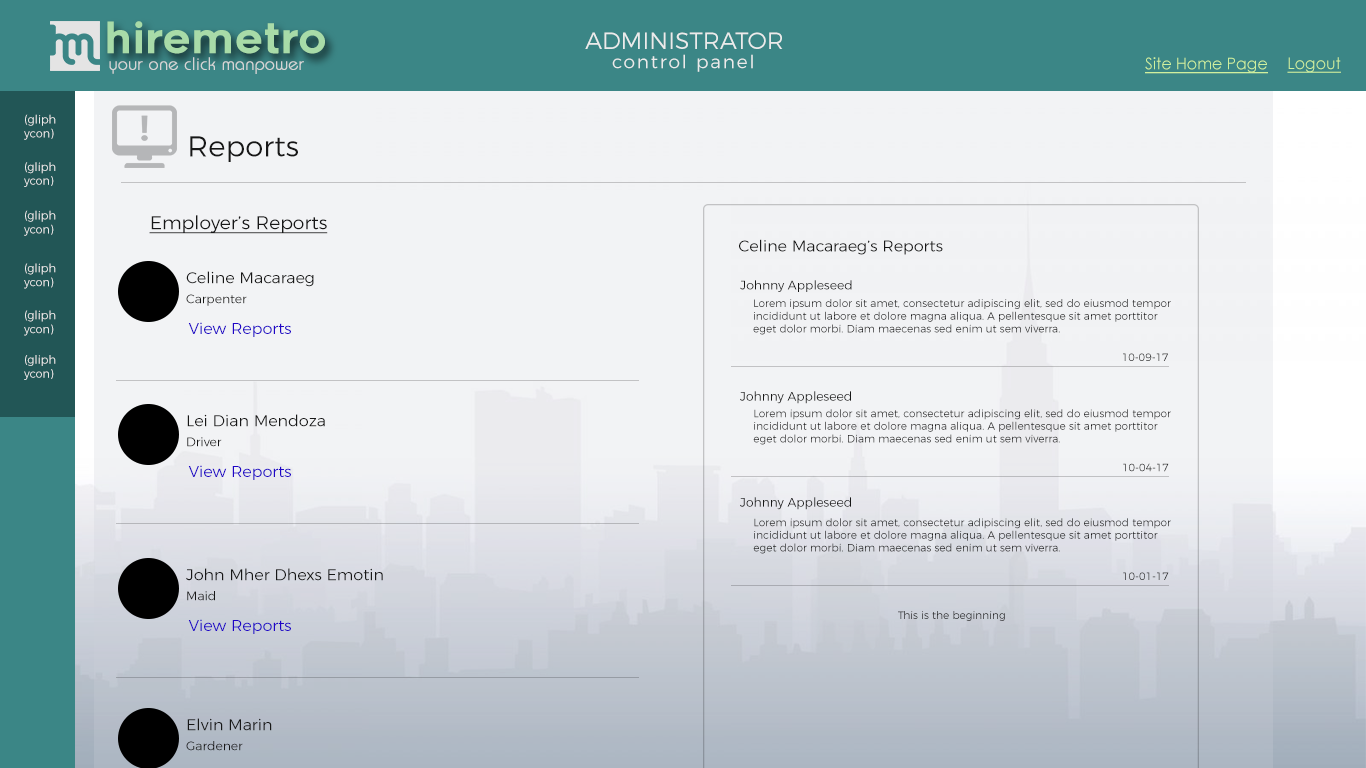
<style>
.page{position:relative;width:1366px;height:768px;background:#f2f3f5}
.page>*{position:absolute;margin:0}
.t1{font:42.1px "Renogare-Regular";color:#a8dba8}
.t2{font:23.6px "Montserrat-Light";color:#ebebeb}
.t3{font:18.4px "Montserrat-Light";letter-spacing:0.1em;color:#ebebeb}
.t4{font:17.5px "Brie-Light";color:#d5d5d5;font-weight:bold}
.t5{font:16.1px "CenturyGothic";color:#cff09e;text-decoration:underline}
.t6{font:11.5px "Montserrat-Light";color:#ebebeb}
.t7{font:28.9px "Montserrat-Light";color:#171717}
.t8{font:18.8px "Montserrat-Light";color:#171717;text-decoration:underline}
.t9{font:15.9px "Montserrat-Light";color:#171717}
.t10{font:12.3px "Montserrat-Light";color:#171717}
.t11{font:10.6px "Montserrat-Light";color:#171717}
.t12{font:15.9px "Montserrat-Light";color:#1f04c6}
.t13{font:10.6px "Montserrat-Light"}
.t14{font:12.6px "Montserrat-Light";color:#171717}
.t15{font:10.5px "Montserrat-Light";color:#171717}
.t16{font:10.5px "Montserrat-Light"}
</style>
<div class="page">
<p class="t1" style="left:107px;top:21px;width:218px;height:33px">hiremetro</p>
<p class="t2" style="left:585px;top:32px;width:198px;height:17px">ADMINISTRATOR</p>
<p class="t3" style="left:612px;top:54px;width:141px;height:18px">control panel</p>
<p class="t4" style="left:109px;top:57px;width:195px;height:17px">your one click manpower</p>
<p class="t5" style="left:1145px;top:57px;width:123px;height:17px">Site Home Page</p>
<p class="t5" style="left:1287px;top:57px;width:54px;height:16px">Logout</p>
<p class="t6" style="left:24px;top:114px;width:32px;height:26px">(gliph<br>ycon)</p>
<p class="t7" style="left:190px;top:136px;width:108px;height:26px">Reports</p>
<p class="t6" style="left:24px;top:162px;width:32px;height:25px">(gliph<br>ycon)</p>
<p class="t6" style="left:24px;top:210px;width:32px;height:26px">(gliph<br>ycon)</p>
<p class="t8" style="left:149px;top:215px;width:179px;height:19px">Employer’s Reports</p>
<p class="t9" style="left:739px;top:239px;width:204px;height:16px">Celine Macaraeg’s Reports</p>
<p class="t6" style="left:24px;top:263px;width:32px;height:26px">(gliph<br>ycon)</p>
<p class="t9" style="left:186px;top:271px;width:128px;height:16px">Celine Macaraeg</p>
<p class="t10" style="left:740px;top:280px;width:112px;height:12px">Johnny Appleseed</p>
<p class="t10" style="left:186px;top:294px;width:61px;height:12px">Carpenter</p>
<p class="t11" style="left:753px;top:299px;width:418px;height:36px">Lorem ipsum dolor sit amet, consectetur adipiscing elit, sed do eiusmod tempor incididunt ut labore et dolore magna aliqua. A pellentesque sit amet porttitor eget dolor morbi. Diam maecenas sed enim ut sem viverra.</p>
<p class="t6" style="left:24px;top:310px;width:32px;height:26px">(gliph<br>ycon)</p>
<p class="t12" style="left:188px;top:322px;width:103px;height:15px">View Reports</p>
<p class="t13" style="left:1123px;top:353px;width:45px;height:8px">10-09-17</p>
<p class="t6" style="left:24px;top:355px;width:32px;height:25px">(gliph<br>ycon)</p>
<p class="t14" style="left:740px;top:391px;width:111px;height:13px">Johnny Appleseed</p>
<p class="t9" style="left:187px;top:414px;width:138px;height:13px">Lei Dian Mendoza</p>
<p class="t15" style="left:753px;top:409px;width:418px;height:36px">Lorem ipsum dolor sit amet, consectetur adipiscing elit, sed do eiusmod tempor incididunt ut labore et dolore magna aliqua. A pellentesque sit amet porttitor eget dolor morbi. Diam maecenas sed enim ut sem viverra.</p>
<p class="t10" style="left:187px;top:437px;width:35px;height:10px">Driver</p>
<p class="t12" style="left:188px;top:465px;width:103px;height:15px">View Reports</p>
<p class="t16" style="left:1123px;top:463px;width:46px;height:9px">10-04-17</p>
<p class="t14" style="left:740px;top:497px;width:111px;height:13px">Johnny Appleseed</p>
<p class="t15" style="left:753px;top:518px;width:418px;height:36px">Lorem ipsum dolor sit amet, consectetur adipiscing elit, sed do eiusmod tempor incididunt ut labore et dolore magna aliqua. A pellentesque sit amet porttitor eget dolor morbi. Diam maecenas sed enim ut sem viverra.</p>
<p class="t9" style="left:186px;top:568px;width:197px;height:13px">John Mher Dhexs Emotin</p>
<p class="t16" style="left:1123px;top:572px;width:46px;height:8px">10-01-17</p>
<p class="t10" style="left:187px;top:591px;width:28px;height:10px">Maid</p>
<p class="t13" style="left:898px;top:611px;width:107px;height:10px">This is the beginning</p>
<p class="t12" style="left:188px;top:619px;width:103px;height:15px">View Reports</p>
<p class="t9" style="left:187px;top:718px;width:85px;height:13px">Elvin Marin</p>
<p class="t10" style="left:186px;top:741px;width:57px;height:10px">Gardener</p>
</div>
